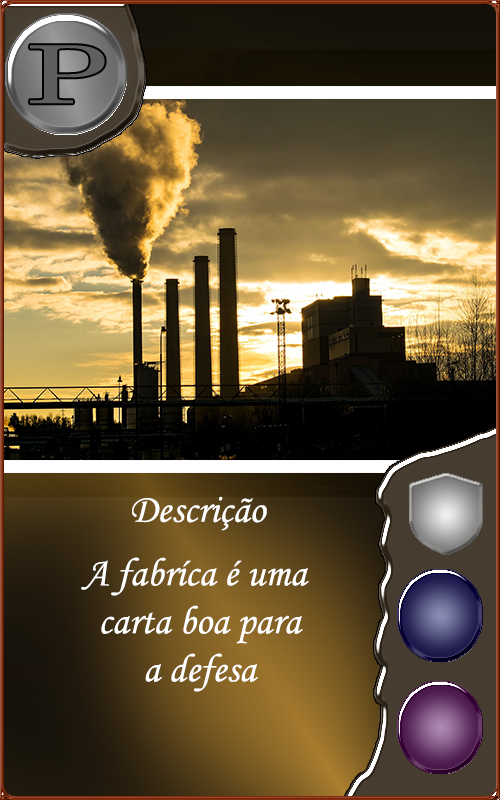
<style>
.page{position:relative;width:500px;height:800px}
.page>*{position:absolute;margin:0}
.t1{font:40px "MonotypeCorsiva";color:#fffefe}
.t2{font:40px "MonotypeCorsiva";color:#ffffff}
</style>
<div class="page">
<p class="t1" style="left:132px;top:496px;width:135px;height:35px">Descrição</p>
<p class="t2" style="left:81px;top:557px;width:228px;height:135px;text-align:center">A fabríca é uma <br>carta boa para<br>a defesa</p>
</div>
